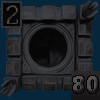
<style>
.page{position:relative;width:100px;height:100px}
.page>*{position:absolute;margin:0}
.t1{font:29.2px "Rockwell-Bold"}
.t2{font:25px "Rockwell-Bold"}
</style>
<div class="page">
<p class="t1" style="left:6px;top:5px;width:13px;height:20px">2</p>
<p class="t2" style="left:73px;top:76px;width:25px;height:17px">80</p>
</div>
